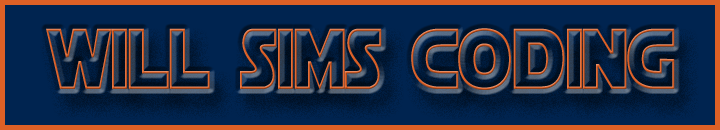
<style>
.page{position:relative;width:720px;height:130px;background:#002450}
.page>*{position:absolute;margin:0}
.t1{font:85.4px "StarJediHollow";scale:0.76 1}
</style>
<div class="page">
<p class="t1" style="left:46px;top:28px;width:629px;height:62px">will sims coding</p>
</div>
